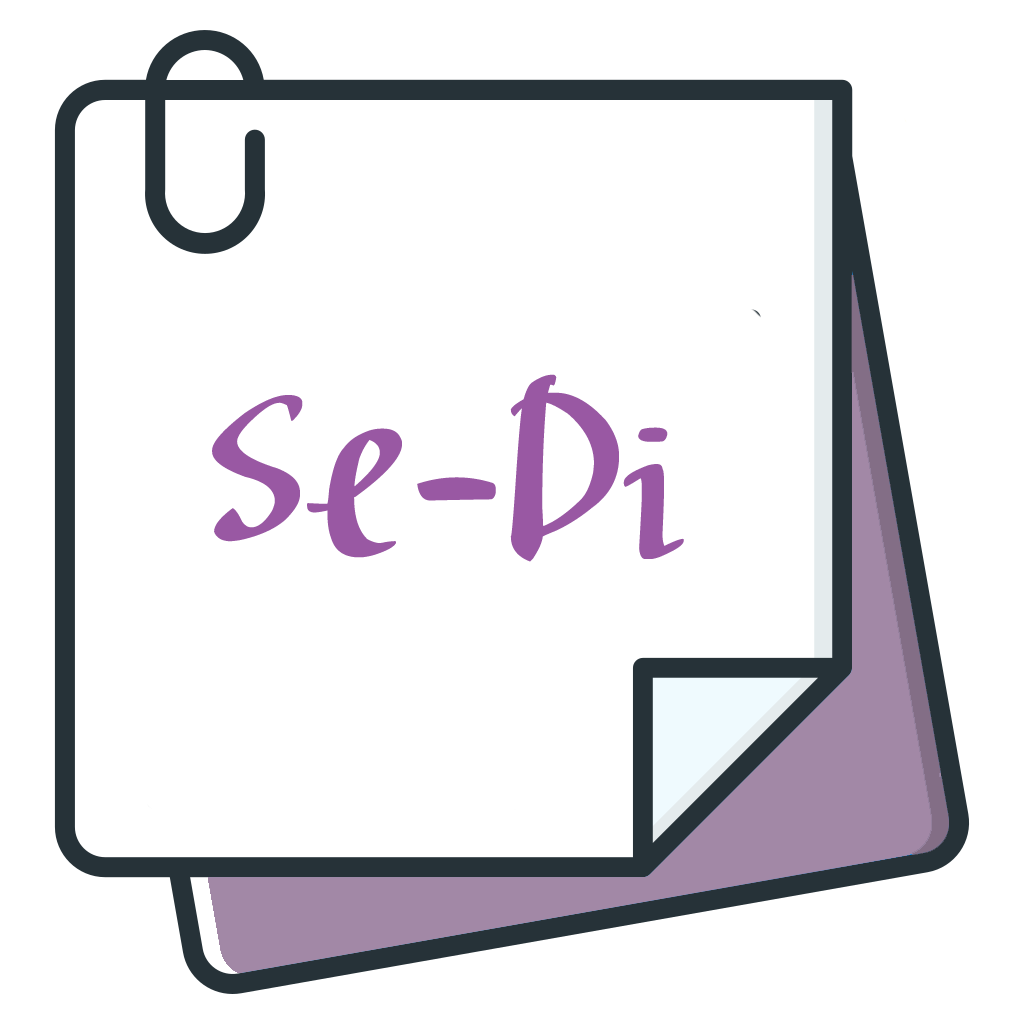
<style>
.page{position:relative;width:1024px;height:1024px;background:#ffffff}
.page>*{position:absolute;margin:0}
.t1{font:256px "HanyiSentyMarshmallow";color:#9958a3}
</style>
<div class="page">
<p class="t1" style="left:212px;top:374px;width:472px;height:188px">Se-Di</p>
</div>
